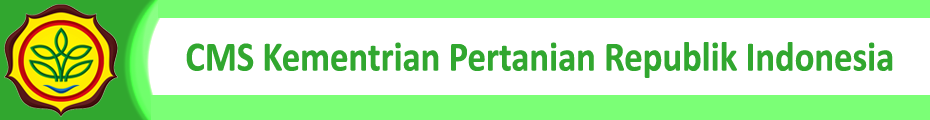
<style>
.page{position:relative;width:930px;height:120px;background:#ffffff}
.page>*{position:absolute;margin:0}
.t1{font:41.9px "Calibri-Bold";color:#31a72f;scale:0.88 1}
</style>
<div class="page">
<p class="t1" style="left:186px;top:42px;width:707px;height:36px">CMS Kementrian Pertanian Republik Indonesia</p>
</div>
